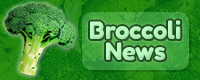
<style>
.page{position:relative;width:200px;height:80px}
.page>*{position:absolute;margin:0}
.t1{font:24px/21px "FredokaOne-Regular";color:#b9fbc2}
</style>
<div class="page">
<p class="t1" style="left:90px;top:20px;width:91px;height:41px;text-align:center">Broccoli<br>News</p>
</div>
